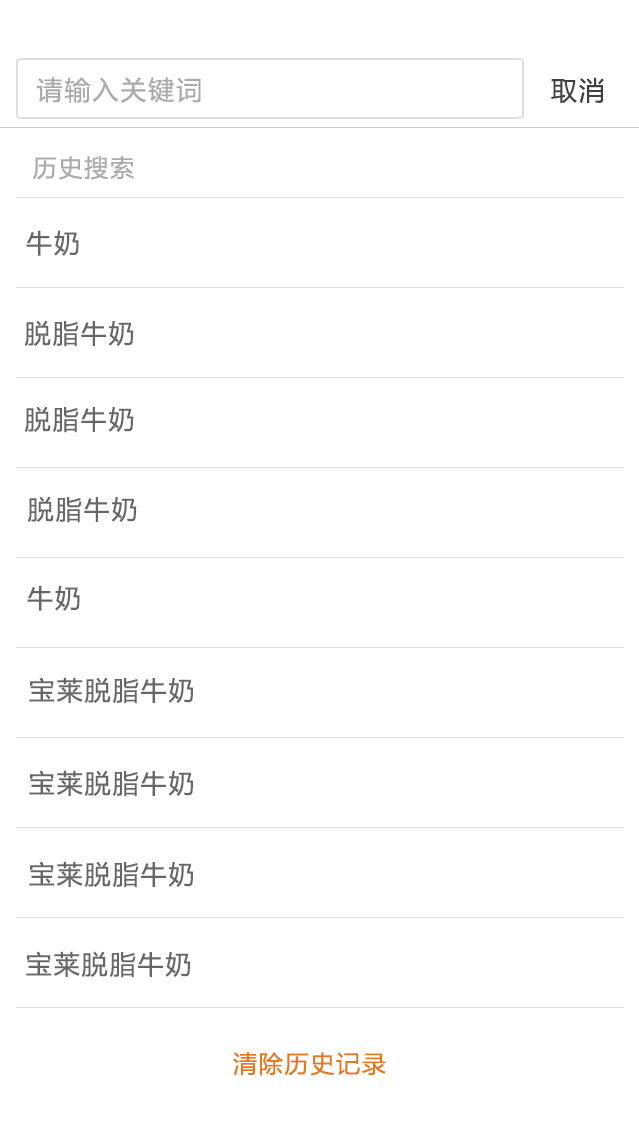
<style>
.page{position:relative;width:639px;height:1136px;background:#ffffff}
.page>*{position:absolute;margin:0}
.t1{font:26px "MicrosoftYaHei";letter-spacing:0.075em;color:#abaaaa}
.t2{font:26px "MicrosoftYaHei";letter-spacing:0.075em;color:#414141}
.t3{font:24px "MicrosoftYaHei";letter-spacing:0.075em;color:#abaaaa}
.t4{font:26px "MicrosoftYaHei";letter-spacing:0.075em;color:#666666}
.t5{font:24px "MicrosoftYaHei";letter-spacing:0.075em;color:#e77817}
</style>
<div class="page">
<p class="t1" style="left:37px;top:77px;width:164px;height:26px">请输入关键词</p>
<p class="t2" style="left:551px;top:77px;width:53px;height:26px">取消</p>
<p class="t3" style="left:33px;top:156px;width:101px;height:24px">历史搜索</p>
<p class="t4" style="left:26px;top:230px;width:53px;height:26px">牛奶</p>
<p class="t4" style="left:24px;top:320px;width:110px;height:27px">脱脂牛奶</p>
<p class="t4" style="left:24px;top:406px;width:110px;height:27px">脱脂牛奶</p>
<p class="t4" style="left:27px;top:496px;width:110px;height:27px">脱脂牛奶</p>
<p class="t4" style="left:27px;top:585px;width:53px;height:26px">牛奶</p>
<p class="t4" style="left:29px;top:677px;width:165px;height:27px">宝莱脱脂牛奶</p>
<p class="t4" style="left:29px;top:770px;width:165px;height:27px">宝莱脱脂牛奶</p>
<p class="t4" style="left:29px;top:861px;width:165px;height:27px">宝莱脱脂牛奶</p>
<p class="t4" style="left:26px;top:951px;width:165px;height:27px">宝莱脱脂牛奶</p>
<p class="t5" style="left:233px;top:1052px;width:153px;height:24px">清除历史记录</p>
</div>
